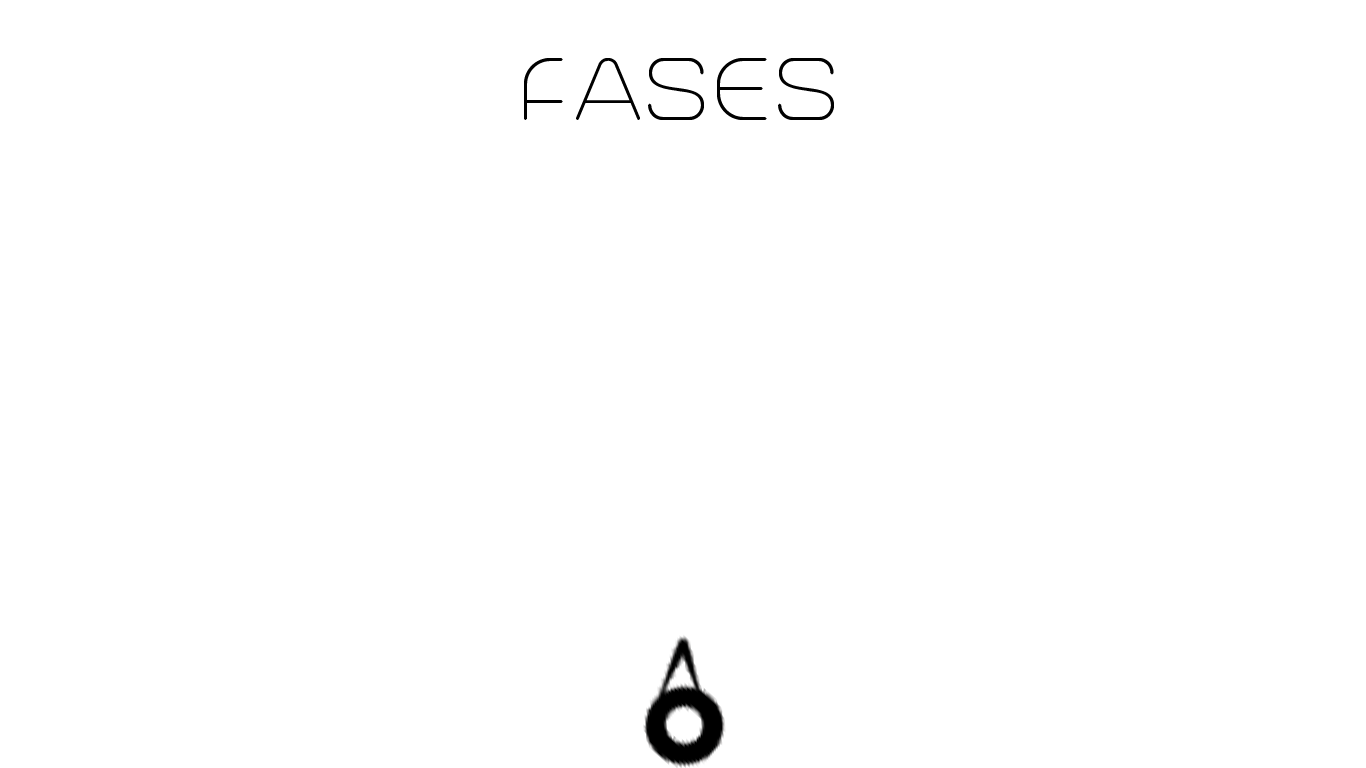
<style>
.page{position:relative;width:1366px;height:768px;background:#ffffff}
.page>*{position:absolute;margin:0}
.t1{font:111.1px "Trench-Thin";color:#010101}
</style>
<div class="page">
<p class="t1" style="left:524px;top:58px;width:310px;height:62px">FASES</p>
</div>
